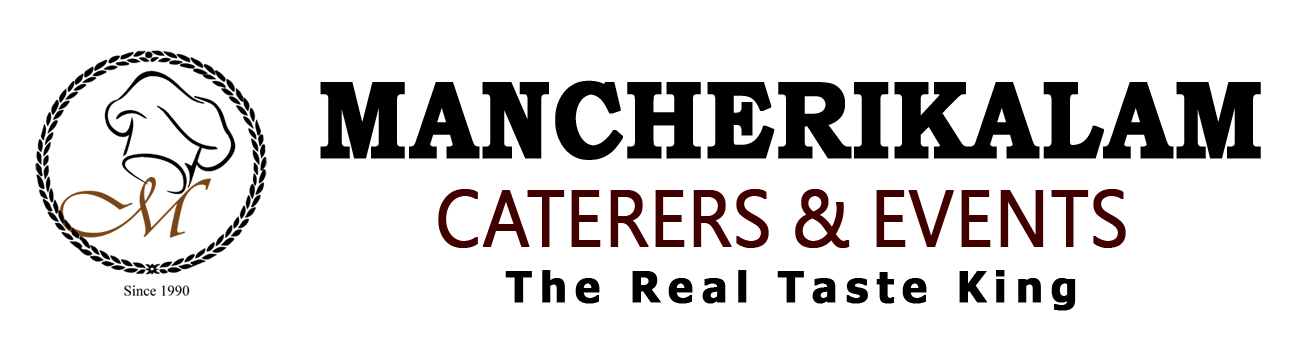
<style>
.page{position:relative;width:1290px;height:353px;background:#ffffff}
.page>*{position:absolute;margin:0}
.t1{font:109.7px "BookmanOldStyle-Bold";color:#000000;font-weight:bold;scale:0.86 1}
.t2{font:74px "MicrosoftJhengHeiRegular";color:#410000;font-weight:bold;scale:0.91 1}
.t3{font:42.3px "Verdana-Bold";letter-spacing:0.18em;color:#000000;font-weight:bold;scale:0.91 1}
</style>
<div class="page">
<p class="t1" style="left:320px;top:80px;width:941px;height:80px">MANCHERIKALAM</p>
<p class="t2" style="left:438px;top:189px;width:688px;height:59px">CATERERS &amp; EVENTS</p>
<p class="t3" style="left:505px;top:270px;width:571px;height:41px">The Real Taste King</p>
</div>
